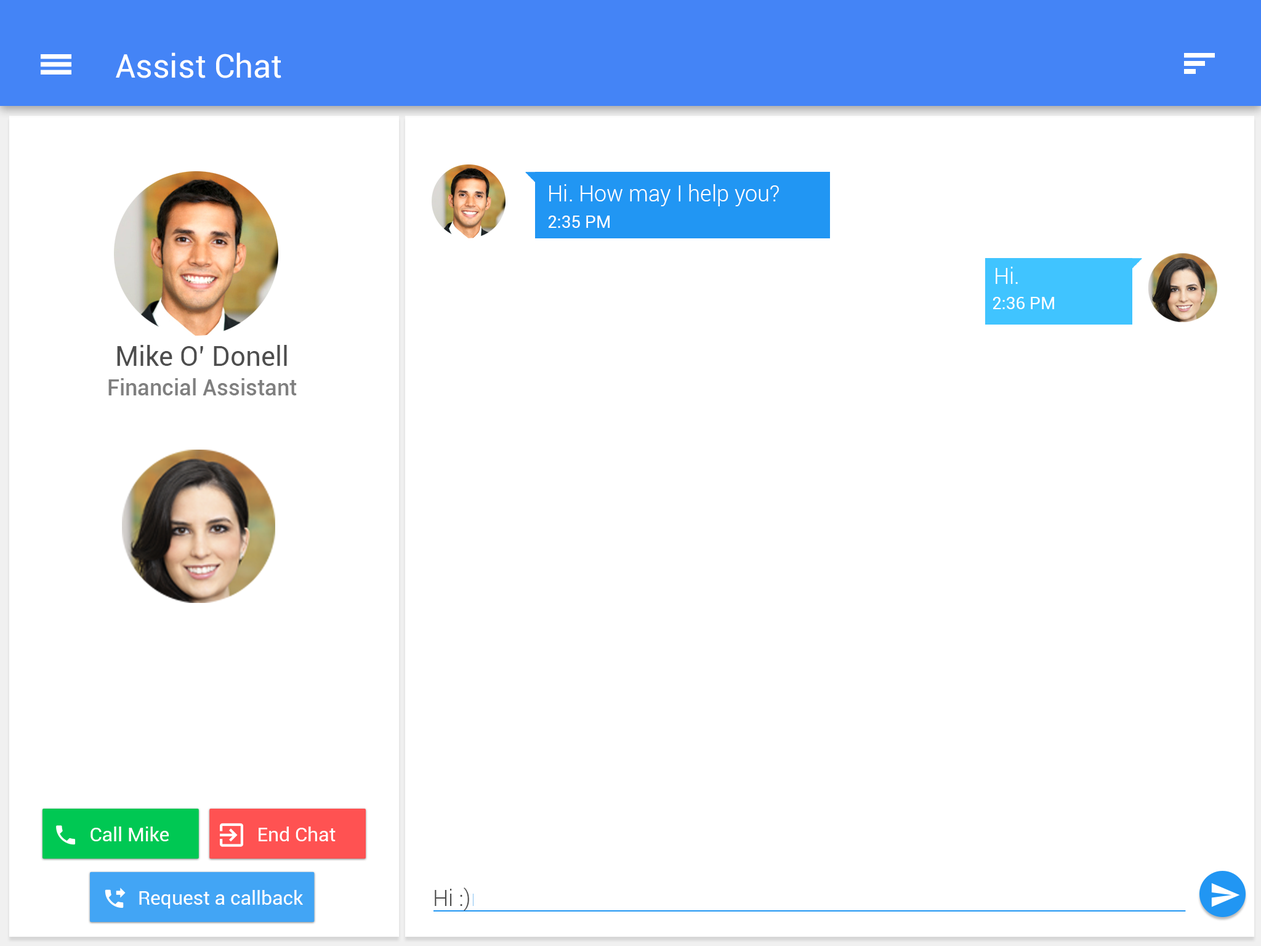
<style>
.page{position:relative;width:1261px;height:946px;background:#ffffff}
.page>*{position:absolute;margin:0}
.t1{font:32.6px "Roboto-Regular";color:#ffffff}
.t2{font:22.2px "Roboto-Light";color:#ffffff}
.t3{font:17.2px "Roboto-Regular";color:#ffffff}
.t4{font:22.2px/29.6px "Roboto-Medium";color:#7f7f7f}
.t5{font:27.1px/29.6px "Roboto-Regular";color:#4d4d4d}
.t6{font:19.4px "Roboto-Regular";color:#ffffff}
.t7{font:22.2px "Roboto-Light";color:#4d4d4d}
</style>
<div class="page">
<p class="t1" style="left:116px;top:52px;width:165px;height:26px">Assist Chat</p>
<p class="t2" style="left:549px;top:184px;width:230px;height:22px">Hi. How may I help you?</p>
<p class="t3" style="left:548px;top:215px;width:62px;height:13px">2:35 PM</p>
<p class="t2" style="left:996px;top:267px;width:22px;height:17px">Hi.</p>
<p class="t3" style="left:992px;top:297px;width:62px;height:12px">2:36 PM</p>
<p class="t4" style="left:108px;top:345px;width:189px;height:50px;text-align:center"><span class="t5">Mike O’ Donell<br></span>Financial Assistant</p>
<p class="t6" style="left:91px;top:826px;width:78px;height:15px">Call Mike</p>
<p class="t6" style="left:259px;top:826px;width:77px;height:15px">End Chat</p>
<p class="t6" style="left:139px;top:890px;width:164px;height:18px">Request a callback</p>
<p class="t7" style="left:435px;top:887px;width:34px;height:24px">Hi :)</p>
</div>
